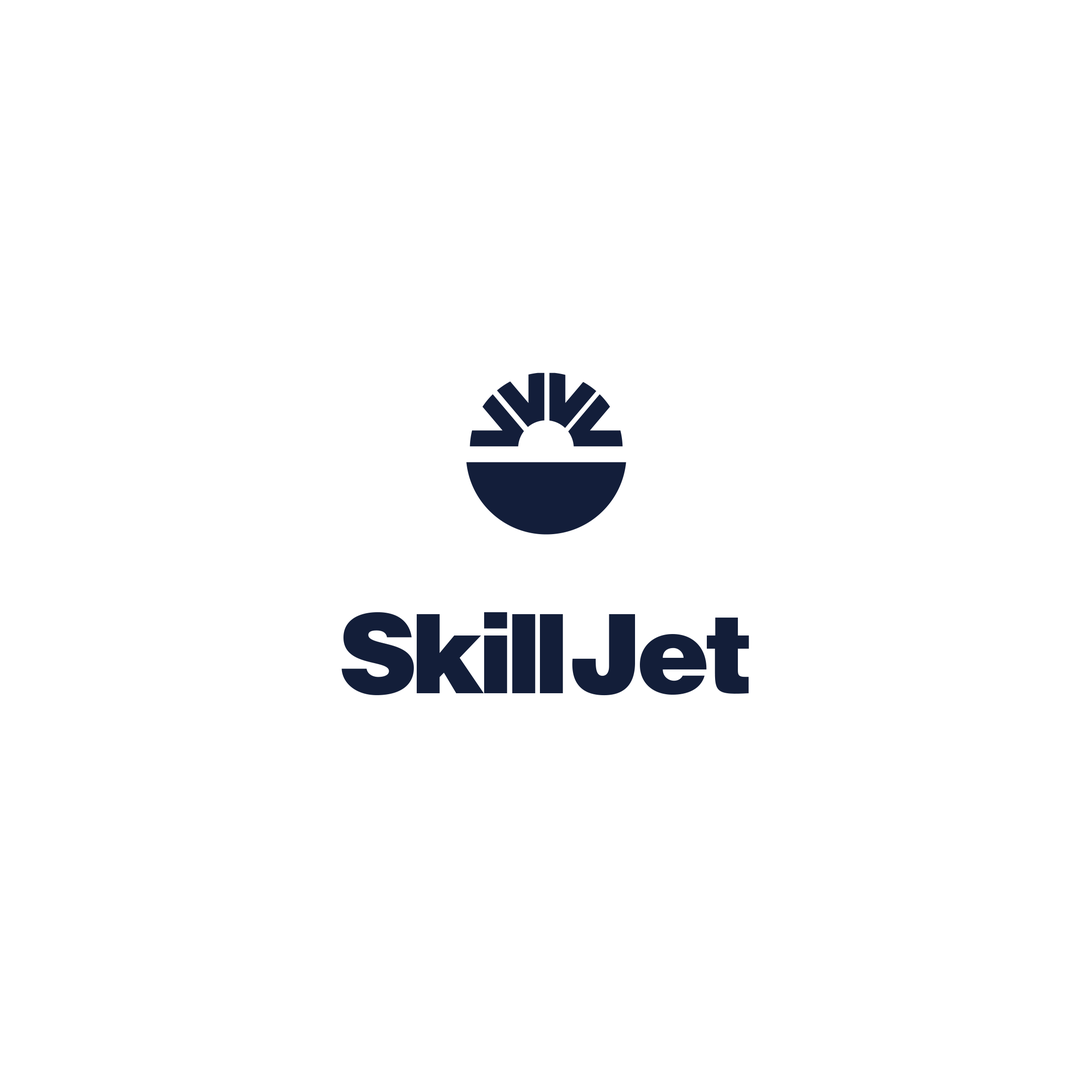
<style>
.page{position:relative;width:1092px;height:1092px;background:#ffffff}
.page>*{position:absolute;margin:0}
.t1{font:109.9px "Helvetica-Black";color:#131e3a}
</style>
<div class="page">
<p class="t1" style="left:342px;top:612px;width:407px;height:84px">SkillJet</p>
</div>
